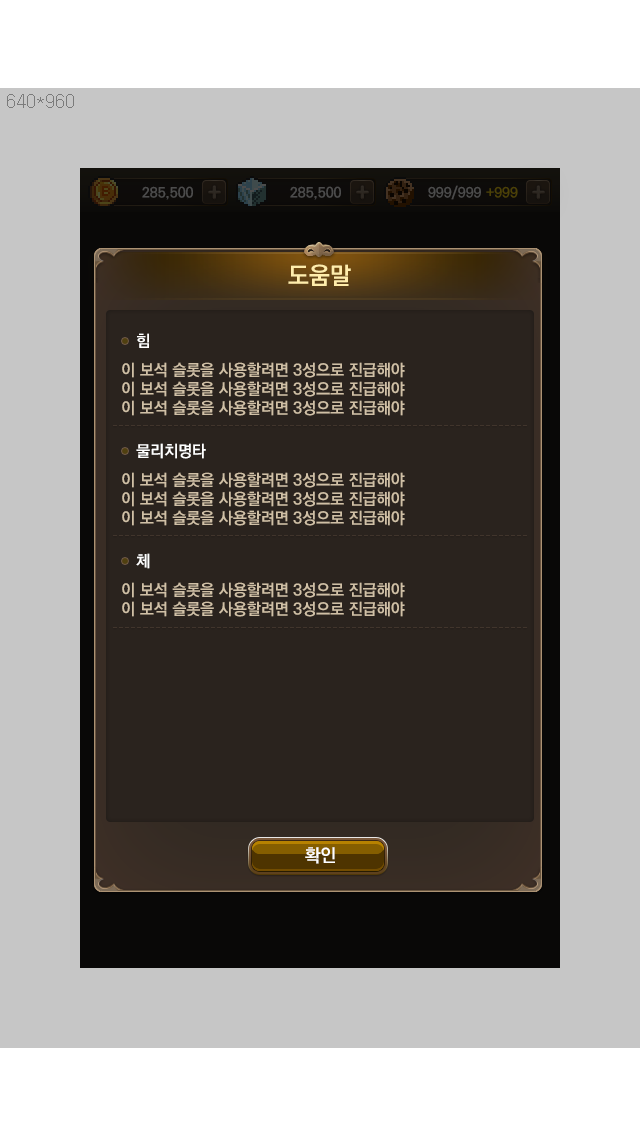
<style>
.page{position:relative;width:640px;height:1136px;background:#c6c6c6}
.page>*{position:absolute;margin:0}
.t1{font:24px "KoPubDotumBold";color:#ffedab}
.t2{font:16px "KoPubDotumBold";color:#ffffff}
.t3{font:16px "KoPubDotumBold";color:#d0c0a6}
.t4{font:18px "KoPubDotumBold";color:#ffffff}
</style>
<div class="page">
<p class="t1" style="left:288px;top:264px;width:63px;height:22px">도움말</p>
<p class="t2" style="left:137px;top:333px;width:12px;height:15px">힘</p>
<p class="t3" style="left:122px;top:362px;width:283px;height:54px">이 보석 슬롯을 사용할려면 3성으로 진급해야 <br>이 보석 슬롯을 사용할려면 3성으로 진급해야 <br>이 보석 슬롯을 사용할려면 3성으로 진급해야</p>
<p class="t2" style="left:136px;top:443px;width:70px;height:16px">물리치명타</p>
<p class="t3" style="left:122px;top:472px;width:283px;height:54px">이 보석 슬롯을 사용할려면 3성으로 진급해야 <br>이 보석 슬롯을 사용할려면 3성으로 진급해야 <br>이 보석 슬롯을 사용할려면 3성으로 진급해야</p>
<p class="t2" style="left:136px;top:553px;width:14px;height:16px">체</p>
<p class="t3" style="left:122px;top:582px;width:283px;height:35px">이 보석 슬롯을 사용할려면 3성으로 진급해야 <br>이 보석 슬롯을 사용할려면 3성으로 진급해야</p>
<p class="t4" style="left:305px;top:847px;width:30px;height:17px">확인</p>
</div>
